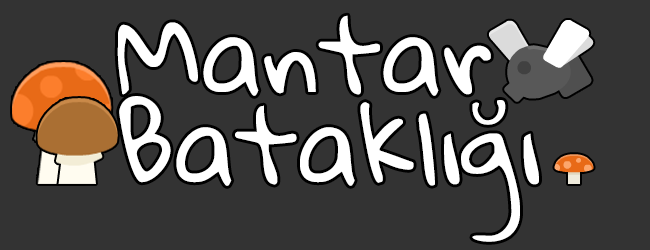
<style>
.page{position:relative;width:650px;height:250px;background:#333333}
.page>*{position:absolute;margin:0}
.t1{font:100px/90px "GloriaHallelujah";color:#ffffff}
</style>
<div class="page">
<p class="t1" style="left:117px;top:15px;width:422px;height:227px">Mantar<br>Bataklığı</p>
</div>
